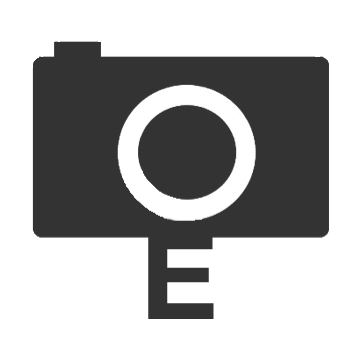
<style>
.page{position:relative;width:360px;height:360px;background:#ffffff}
.page>*{position:absolute;margin:0}
.t1{font:119.8px "HelveticaNeue-Bold";color:#333333}
</style>
<div class="page">
<p class="t1" style="left:148px;top:233px;width:66px;height:86px">E</p>
</div>
